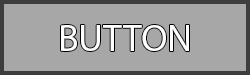
<style>
.page{position:relative;width:250px;height:75px;background:#a7a7a7}
.page>*{position:absolute;margin:0}
.t1{font:38px "MyriadPro-Regular";color:#ffffff}
</style>
<div class="page">
<p class="t1" style="left:61px;top:25px;width:128px;height:26px">BUTTON</p>
</div>
